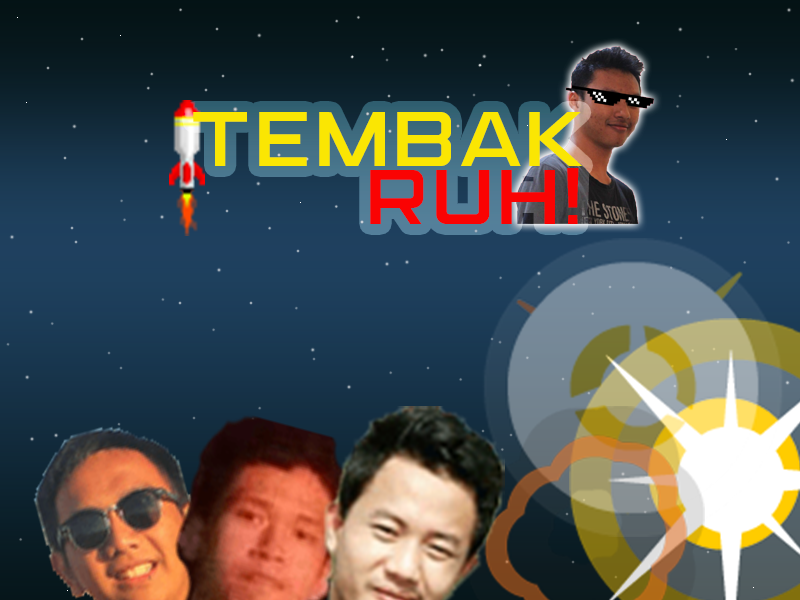
<style>
.page{position:relative;width:800px;height:600px}
.page>*{position:absolute;margin:0}
.t1{font:77.5px/58.3px "MarsekDemi";color:#fae603}
.t2{font:77.5px/58.3px "MarsekDemi";color:#fa0303}
</style>
<div class="page">
<p class="t1" style="left:193px;top:112px;width:390px;height:112px;text-align:right">Tembak<br><span class="t2">ruh!</span></p>
</div>
